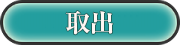
<style>
.page{position:relative;width:180px;height:45px}
.page>*{position:absolute;margin:0}
.t1{font:25px "RyuminPr6N-ExBold";color:#fff6f3}
</style>
<div class="page">
<p class="t1" style="left:66px;top:11px;width:47px;height:24px">取出</p>
</div>
